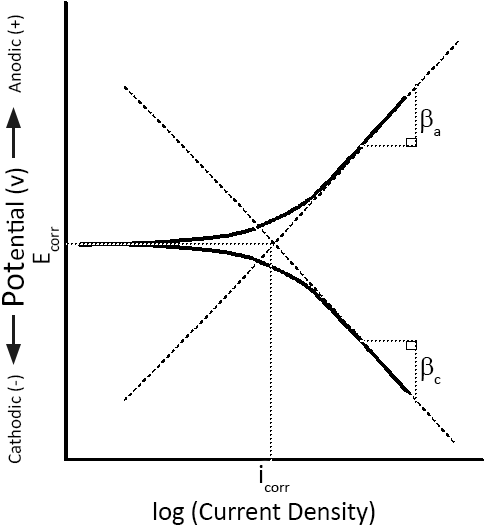
<style>
.page{position:relative;width:485px;height:527px;background:#ffffff}
.page>*{position:absolute;margin:0}
.t1{font:19px "Calibri";color:#000000}
.t2{font:26.6px "Calibri";color:#000000}
.t3{font:34.2px "Calibri";color:#000000}
</style>
<div class="page">
<p class="t1" style="left:7px;top:15px;width:17px;height:78px;rotate:-90deg">Anodic (+)</p>
<p class="t2" style="left:2px;top:168px;width:27px;height:137px;rotate:-90deg"><span class="t3">Pot</span>ential (v)</p>
<p class="t2" style="left:32px;top:226px;width:28px;height:37px;rotate:-90deg">Ecorr</p>
<p class="t1" style="left:7px;top:375px;width:17px;height:89px;rotate:-90deg">Cathodic (-)</p>
<p class="t2" style="left:259px;top:465px;width:31px;height:27px">icorr</p>
<p class="t2" style="left:153px;top:501px;width:222px;height:24px">log (Current Density)</p>
</div>
